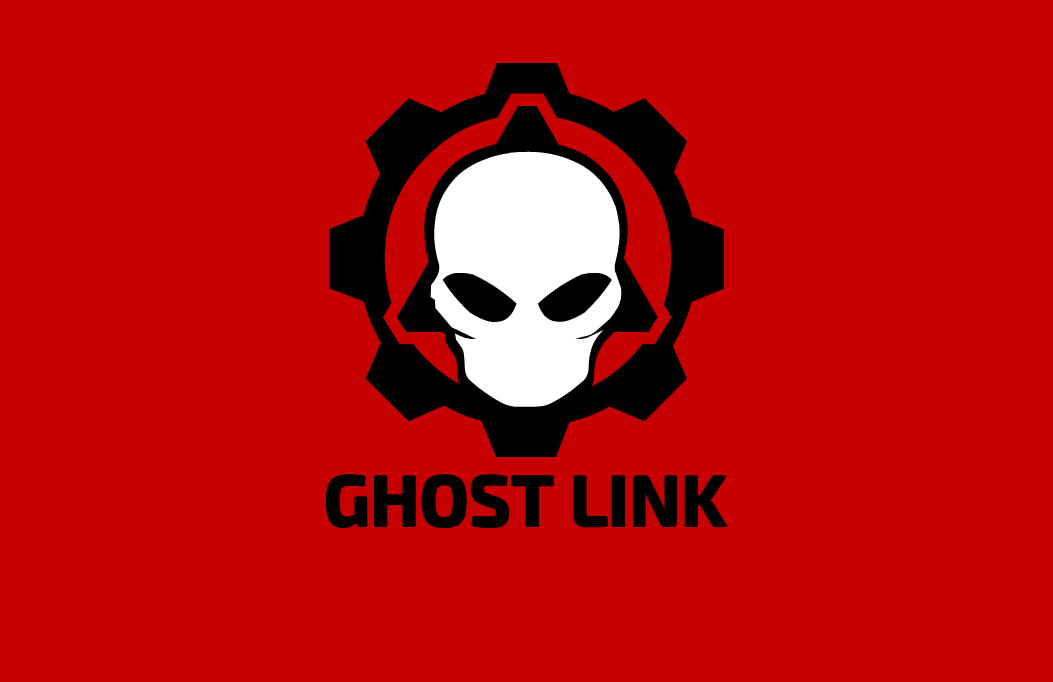
<style>
.page{position:relative;width:1053px;height:682px;background:#c60000}
.page>*{position:absolute;margin:0}
.t1{font:72px "Exo2.0-Bold";color:#000000}
</style>
<div class="page">
<p class="t1" style="left:327px;top:475px;width:400px;height:52px">GHOST LINK</p>
</div>
